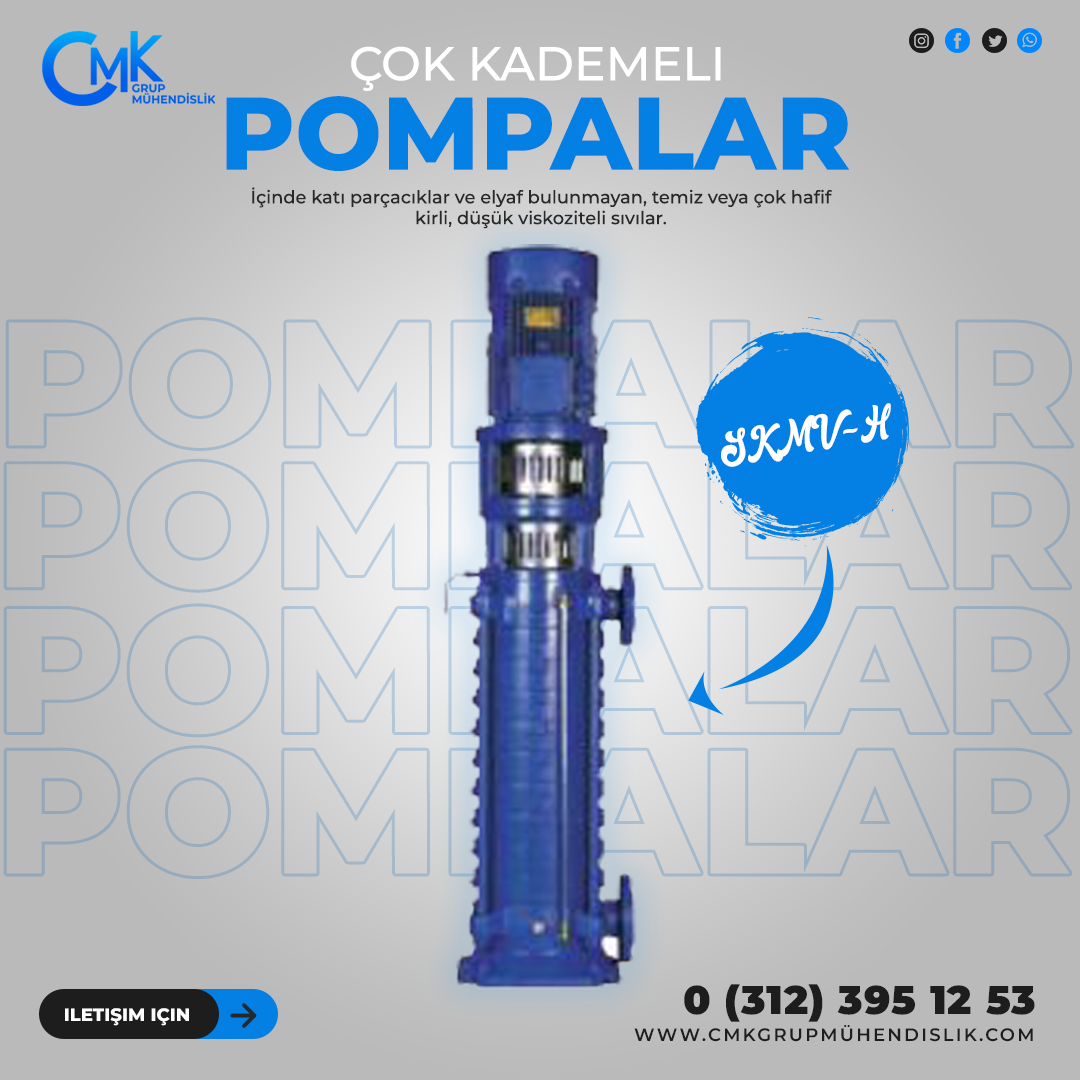
<style>
.page{position:relative;width:1080px;height:1080px;background:#bababa}
.page>*{position:absolute;margin:0}
.t1{font:47.3px "Montserrat-Medium";color:#ffffff;text-transform:uppercase}
.t2{font:102.6px "Montserrat-ExtraBold";color:#047fe3;text-transform:uppercase}
.t3{font:17.9px/20.8px "Montserrat-Medium";color:#282828}
.t4{font:37.8px "RetrowMentho";color:#ffffff}
.t5{font:39.9px "Montserrat-Black";letter-spacing:0.025em;color:#1d1d1d}
.t6{font:18px "Montserrat-ExtraBold";color:#ffffff;text-transform:uppercase}
.t7{font:18px "Montserrat-SemiBold";letter-spacing:0.12em;color:#1d1d1d;text-transform:uppercase}
</style>
<div class="page">
<p class="t1" style="left:351px;top:46px;width:370px;height:45px">Çok Kademeli</p>
<p class="t2" style="left:226px;top:96px;width:623px;height:75px">pompalar</p>
<p class="t3" style="left:252px;top:187px;width:580px;height:42px;text-align:center">İçinde katı parçacıklar ve elyaf bulunmayan, temiz veya çok hafif kirli, düşük viskoziteli sıvılar.</p>
<p class="t4" style="left:721px;top:403px;width:170px;height:64px;rotate:-10deg">SKMV-H</p>
<p class="t5" style="left:684px;top:984px;width:351px;height:38px">0 (312) 395 12 53</p>
<p class="t6" style="left:65px;top:1008px;width:124px;height:18px">iletişim için</p>
<p class="t7" style="left:634px;top:1025px;width:399px;height:17px">www.cmkgrupmühendislik.com</p>
</div>
